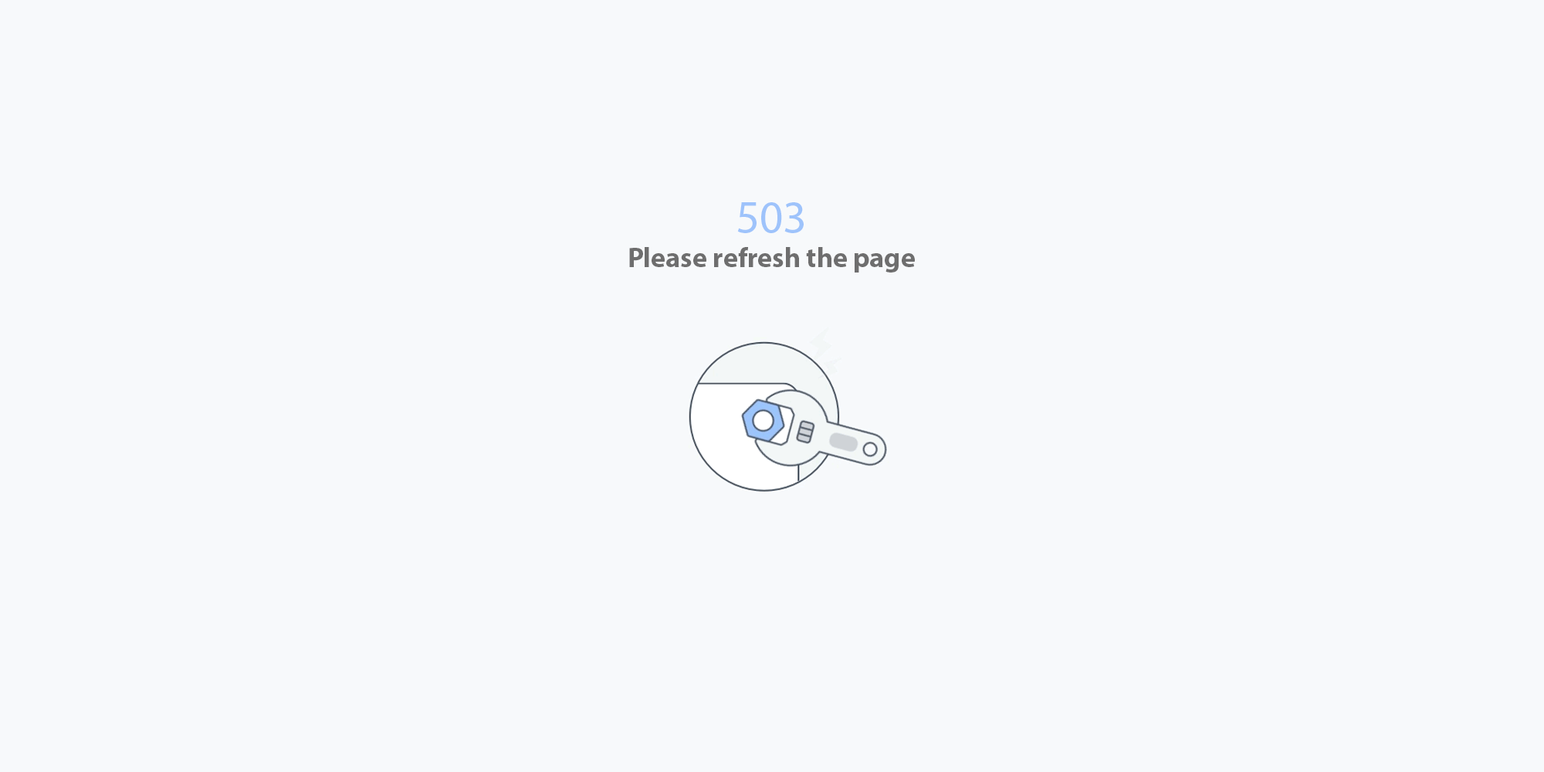
<style>
.page{position:relative;width:1544px;height:772px;background:#f7f9fb}
.page>*{position:absolute;margin:0}
.t1{font:27.8px "MyriadPro-Bold";color:#6e6e6e}
.t2{font:46.3px "MyriadPro-Regular";color:#9ec3fb}
</style>
<div class="page">
<p class="t1" style="left:629px;top:202px;width:286px;height:71px;text-align:center"><span class="t2">503<br></span>Please refresh the page</p>
</div>
